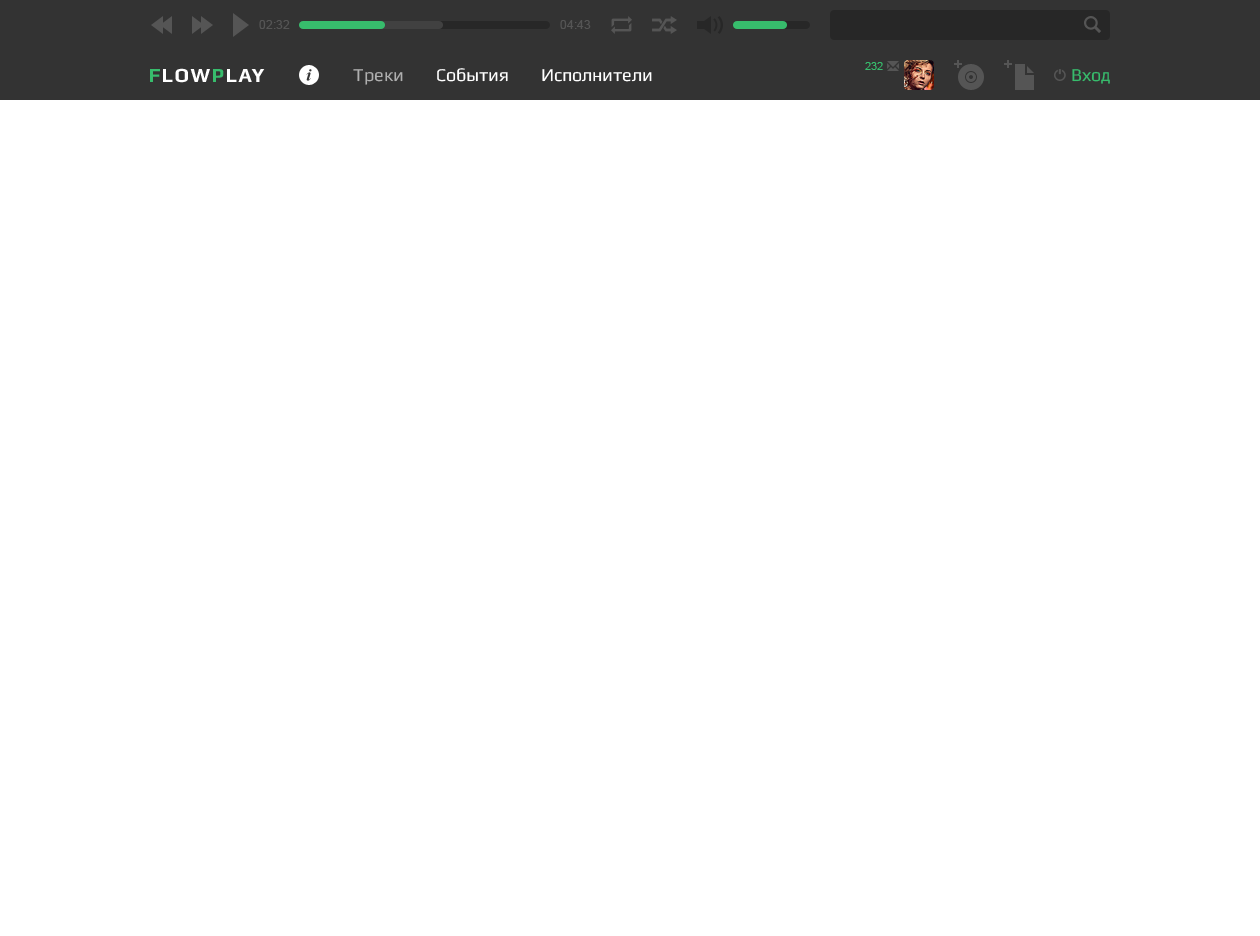
<style>
.page{position:relative;width:1260px;height:936px;background:#ffffff}
.page>*{position:absolute;margin:0}
.t1{font:12px "ArialMT";color:#555555}
.t2{font:11px "ArialMT";color:#37bc6c}
.t3{font:20px "Play-Bold";letter-spacing:0.05em;color:#ffffff;text-transform:uppercase}
.t4{font:20px "Play-Bold";letter-spacing:0.05em;color:#37bc6c;text-transform:uppercase}
.t5{font:18px "Play";color:#ffffff}
.t6{font:18px "Play";color:#afafaf}
.t7{font:18px "Play";color:#37bc6c}
</style>
<div class="page">
<p class="t1" style="left:259px;top:20px;width:31px;height:9px">02:32</p>
<p class="t1" style="left:560px;top:20px;width:31px;height:9px">04:43</p>
<p class="t2" style="left:865px;top:62px;width:18px;height:8px">232</p>
<p class="t3" style="left:150px;top:68px;width:115px;height:15px"><span class="t4">F</span>low<span class="t4">p</span>lay</p>
<p class="t5" style="left:353px;top:68px;width:299px;height:17px"><span class="t6">Треки        </span>События        Исполнители</p>
<p class="t7" style="left:1072px;top:69px;width:38px;height:15px">Вход</p>
</div>
